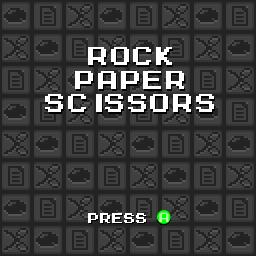
<style>
.page{position:relative;width:256px;height:256px;background:#232323}
.page>*{position:absolute;margin:0}
.t1{font:21.3px "MegaMan-2";letter-spacing:0.075em;color:#ffffff}
.t2{font:10.7px "MegaMan-2";letter-spacing:0.075em;color:#ffffff}
</style>
<div class="page">
<p class="t1" style="left:88px;top:47px;width:84px;height:18px">ROCK</p>
<p class="t1" style="left:75px;top:71px;width:109px;height:18px">PAPER</p>
<p class="t1" style="left:45px;top:94px;width:169px;height:18px">SCISSORS</p>
<p class="t2" style="left:88px;top:213px;width:58px;height:10px">PRESS</p>
</div>
